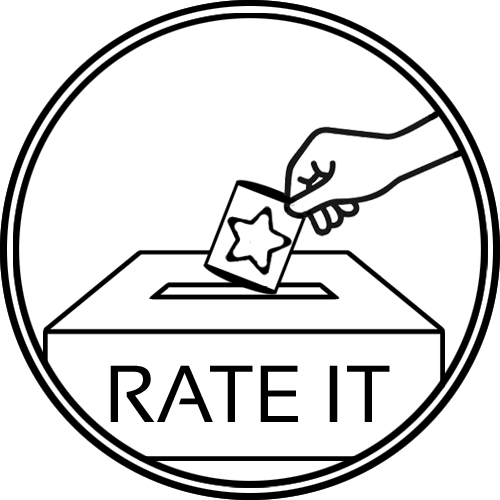
<style>
.page{position:relative;width:500px;height:500px;background:#ffffff}
.page>*{position:absolute;margin:0}
.t1{font:80.4px "Sansation-Regular";color:#000000}
</style>
<div class="page">
<p class="t1" style="left:110px;top:365px;width:280px;height:57px">RATE IT</p>
</div>
